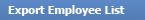
<style>
.page{position:relative;width:145px;height:20px}
.page>*{position:absolute;margin:0}
.t1{font:11px "Tahoma-Bold";color:#ffffff}
</style>
<div class="page">
<p class="t1" style="left:8px;top:5px;width:117px;height:11px">Export Employee List</p>
</div>
